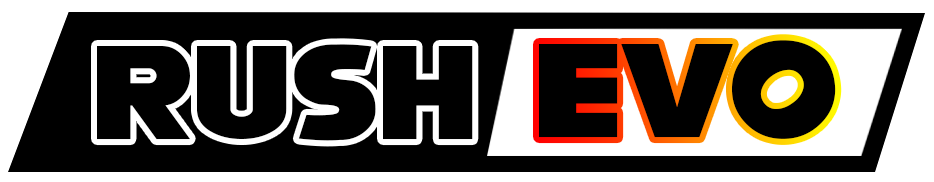
<style>
.page{position:relative;width:934px;height:182px;background:#000000}
.page>*{position:absolute;margin:0}
.t1{font:119px "NiseSegaSonic";color:#000000}
</style>
<div class="page">
<p class="t1" style="left:539px;top:40px;width:297px;height:99px">Evo</p>
<p class="t1" style="left:97px;top:42px;width:740px;height:99px">Rush Evo</p>
</div>
